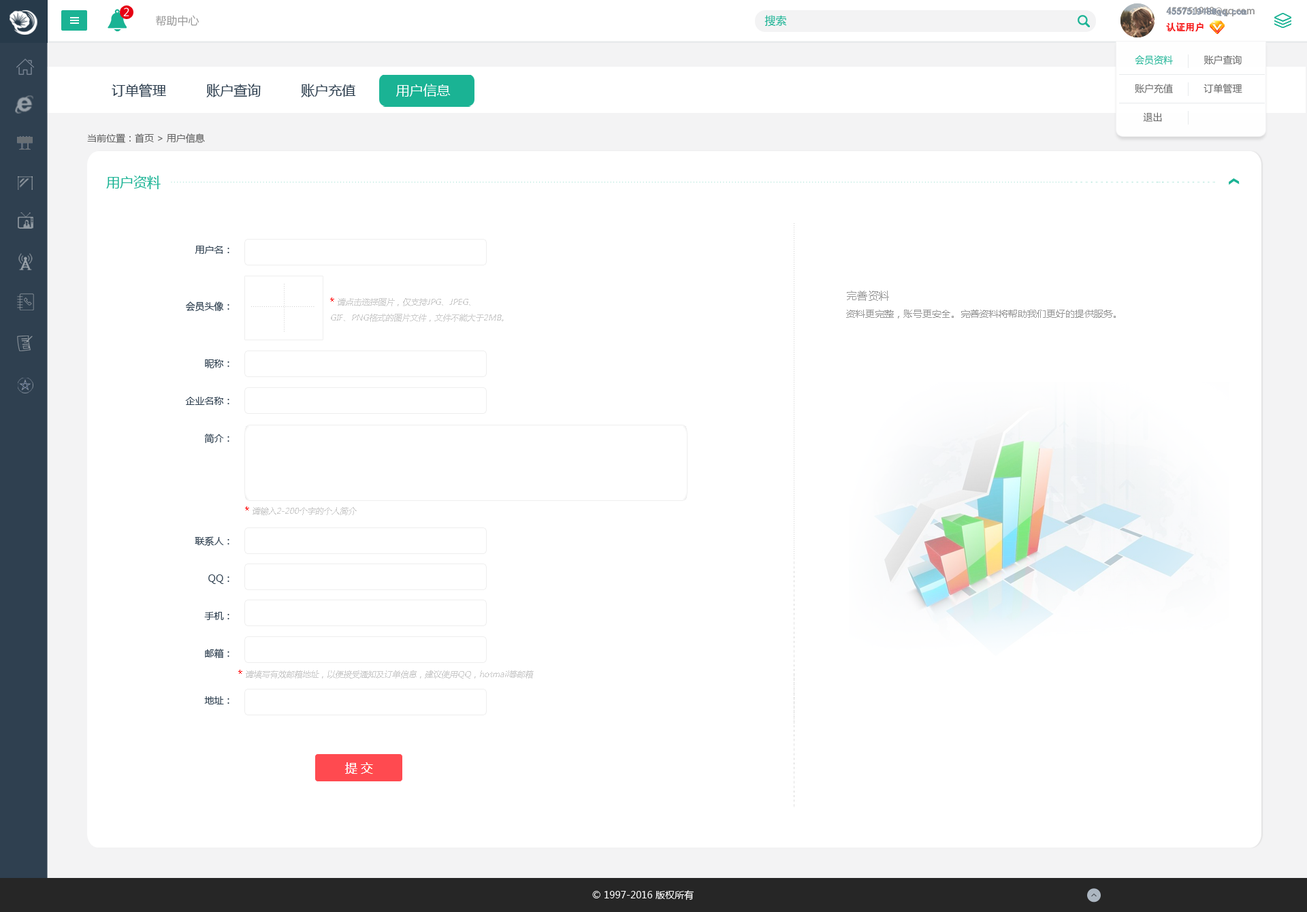
<style>
.page{position:relative;width:1307px;height:912px;background:#ffffff}
.page>*{position:absolute;margin:0}
.t1{font:10.9px "MicrosoftYaHei";color:#ffffff}
.t2{font:10.9px "MicrosoftYaHei";color:#999999}
.t3{font:10.9px "MicrosoftYaHei";color:#1ab394}
.t4{font:9.5px/16.3px "AdobeHeitiStd-Regular";color:#999999}
.t5{font:9.5px/16.3px "AdobeHeitiStd-Regular";color:#f61e1e}
.t6{font:9.5px/16.3px "AdobeHeitiStd-Regular";color:#ffffff}
.t7{font:9.5px/16.3px "SimSun";color:#8894a4;font-weight:bold}
.t8{font:9.5px/16.3px "SimSun";color:#f61e1e}
.t9{font:9.5px/28.6px "MicrosoftYaHei";color:#666666}
.t10{font:9.5px/28.6px "MicrosoftYaHei";color:#1ab394}
.t11{font:13.6px "MicrosoftYaHei";color:#2f4050}
.t12{font:13.6px "MicrosoftYaHei";color:#ffffff}
.t13{font:9.5px "MicrosoftYaHei";color:#666666}
.t14{font:13.6px "MicrosoftYaHei";color:#1ab394}
.t15{font:9.5px/37.4px "MicrosoftYaHei";color:#2f4050}
.t16{font:9.5px/32.7px "MicrosoftYaHei";color:#2f4050}
.t17{font:9.5px/23.8px "MicrosoftYaHei";color:#2f4050}
.t18{font:9.5px "MicrosoftYaHei";color:#999999}
.t19{font:8.2px "MicrosoftYaHei";color:#cccccc;font-style:italic}
.t20{font:9.5px "MicrosoftYaHei";color:#ff0000}
.t21{font:9.5px "MicrosoftYaHei";color:#ffffff}
</style>
<div class="page">
<p class="t1" style="left:123px;top:7px;width:6px;height:9px">2</p>
<p class="t2" style="left:156px;top:15px;width:43px;height:12px">帮助中心</p>
<p class="t3" style="left:765px;top:15px;width:22px;height:12px">搜索</p>
<p class="t4" style="left:1166px;top:7px;width:89px;height:25px">455751948@qq.com<br><span class="t5">认证用户               </span><span class="t6">退出</span></p>
<p class="t7" style="left:1166px;top:7px;width:81px;height:25px">455751948@qq.com<br><span class="t8">认证用户</span></p>
<p class="t9" style="left:1135px;top:55px;width:107px;height:67px"><span class="t10">会员资料</span>           账户查询<br>账户充值           订单管理           <br>   退出</p>
<p class="t11" style="left:112px;top:84px;width:339px;height:13px">订单管理          账户查询          账户充值          <span class="t12">用户信息</span></p>
<p class="t13" style="left:87px;top:133px;width:118px;height:10px">当前位置：首页 &gt; 用户信息</p>
<p class="t14" style="left:106px;top:176px;width:55px;height:13px">用户资料</p>
<p class="t15" style="left:185px;top:246px;width:44px;height:459px;text-align:right"><span class="t16">用</span><span class="t17">户名：<br><br></span><span class="t16">会员头像：<br><br></span>昵称：<br>企业名称：<br>简介：<br><br><br>联系人：<br>QQ：<br>手机：<br>邮箱：<br><br><span class="t16">地址：</span></p>
<p class="t18" style="left:846px;top:291px;width:270px;height:28px"><span class="t2">完善资料<br></span>资料更完整，账号更安全。完善资料将帮助我们更好的提供服务。</p>
<p class="t19" style="left:330px;top:298px;width:174px;height:24px"><span class="t20">* </span>请点击选择图片，仅支持JPG、JPEG、<br>GIF、PNG格式的图片文件，文件不能大于2MB。</p>
<p class="t19" style="left:245px;top:507px;width:112px;height:8px"><span class="t20">* </span>请输入2-200个字的个人简介</p>
<p class="t19" style="left:238px;top:670px;width:296px;height:9px"><span class="t20">* </span>请填写有效邮箱地址，以便接受通知及订单信息，建议使用QQ，hotmail等邮箱</p>
<p class="t21" style="left:592px;top:890px;width:102px;height:11px">© 1997-2016 版权所有</p>
</div>
